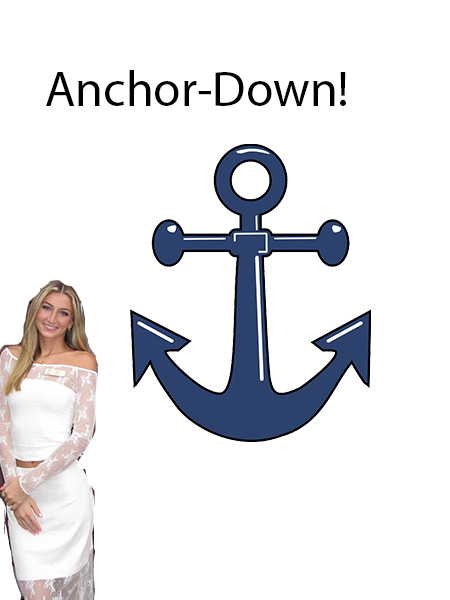
<style>
.page{position:relative;width:450px;height:600px;background:#ffffff}
.page>*{position:absolute;margin:0}
.t1{font:50px "MyriadPro-Regular";color:#000000}
</style>
<div class="page">
<p class="t1" style="left:46px;top:70px;width:300px;height:36px">Anchor-Down!</p>
</div>
